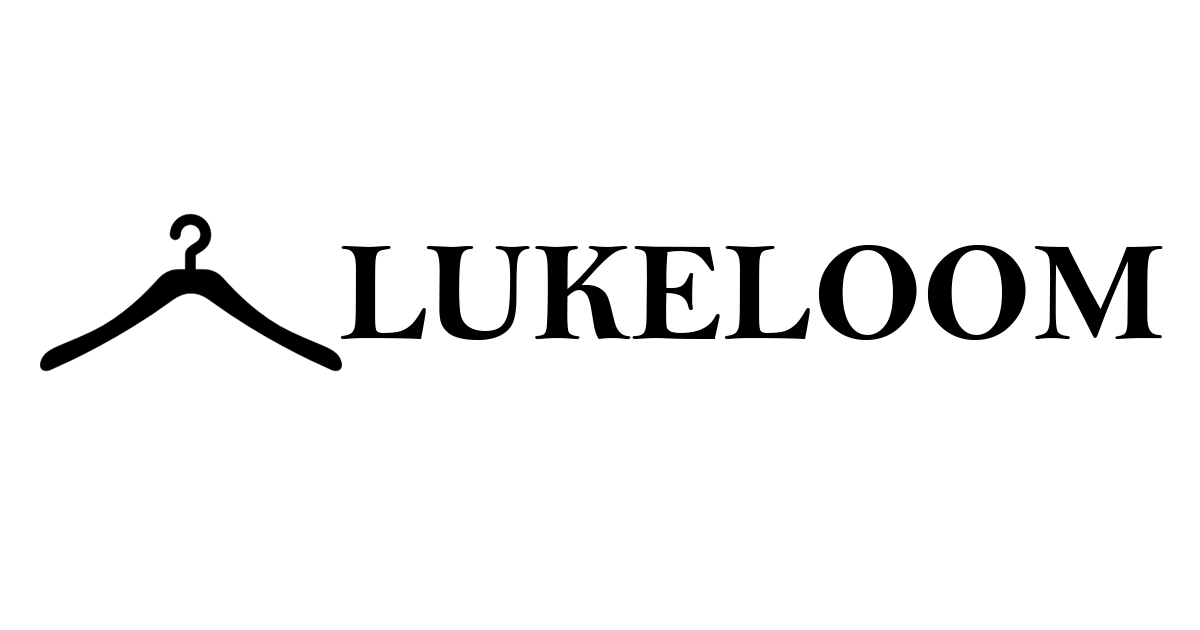
<style>
.page{position:relative;width:1200px;height:630px;background:#ffffff}
.page>*{position:absolute;margin:0}
.t1{font:141.5px "BellMTBold";color:#000000}
</style>
<div class="page">
<p class="t1" style="left:340px;top:245px;width:823px;height:95px">LUKELOOM</p>
</div>
